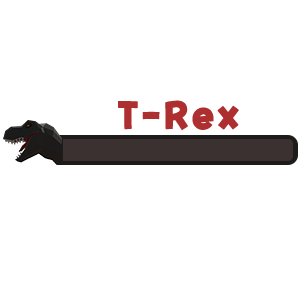
<style>
.page{position:relative;width:300px;height:300px;background:#ffffff}
.page>*{position:absolute;margin:0}
.t1{font:45px "KoreanERIN-M";letter-spacing:0.05em;color:#ae2f2f;font-weight:bold}
</style>
<div class="page">
<p class="t1" style="left:118px;top:100px;width:121px;height:31px">T-Rex</p>
</div>
